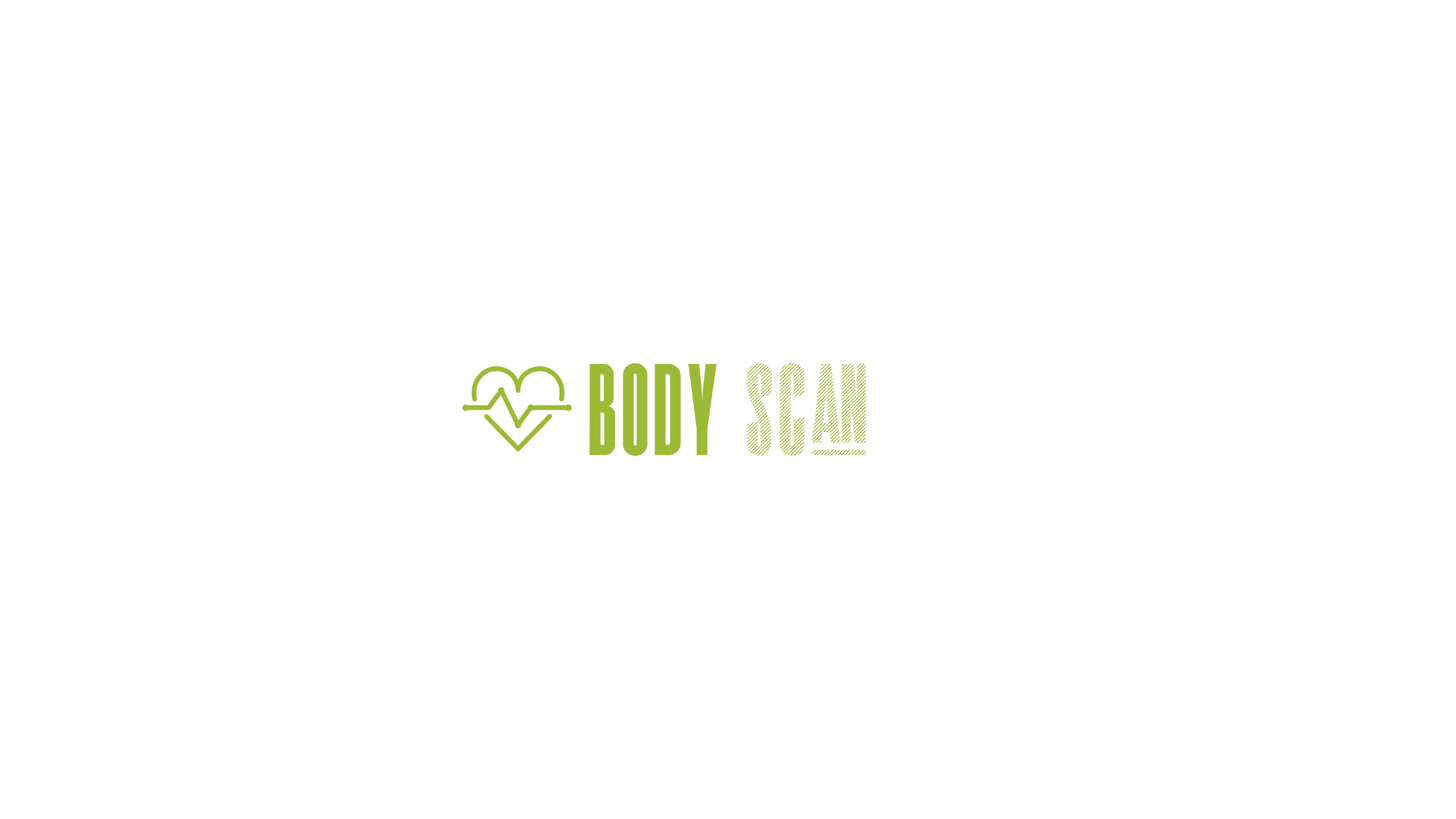
<style>
.page{position:relative;width:1456px;height:819px;background:#ffffff}
.page>*{position:absolute;margin:0}
.t1{font:113.7px "Superline-Regular";letter-spacing:0.05em;color:#9cba35}
.t2{font:113.7px "Superline-Line";letter-spacing:0.05em;color:#9cba35}
</style>
<div class="page">
<p class="t1" style="left:589px;top:362px;width:277px;height:94px">Body <span class="t2">Scan</span></p>
</div>
